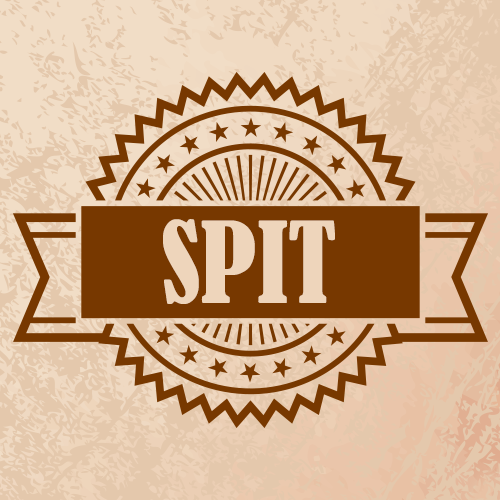
<style>
.page{position:relative;width:500px;height:500px;background:#773800}
.page>*{position:absolute;margin:0}
.t1{font:104.7px "BernardMT-Condensed";color:#eed5bb}
</style>
<div class="page">
<p class="t1" style="left:163px;top:219px;width:172px;height:85px">SPIT</p>
</div>
